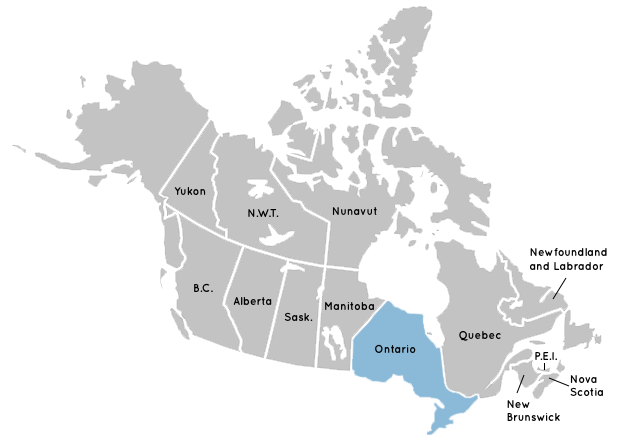
<style>
.page{position:relative;width:622px;height:439px;background:#ffffff}
.page>*{position:absolute;margin:0}
.t1{font:11px "Quicksand-Bold";color:#000000}
.t2{font:11px/13.2px "Quicksand-Bold";color:#000000}
</style>
<div class="page">
<p class="t1" style="left:174px;top:187px;width:32px;height:8px">Yukon</p>
<p class="t1" style="left:248px;top:209px;width:31px;height:8px">N.W.T.</p>
<p class="t1" style="left:332px;top:207px;width:45px;height:8px">Nunavut</p>
<p class="t2" style="left:530px;top:248px;width:77px;height:22px">Newfoundland<br>and Labrador</p>
<p class="t1" style="left:194px;top:283px;width:19px;height:9px">B.C.</p>
<p class="t1" style="left:233px;top:297px;width:39px;height:8px">Alberta</p>
<p class="t1" style="left:325px;top:302px;width:49px;height:8px">Manitoba</p>
<p class="t1" style="left:284px;top:312px;width:29px;height:9px">Sask.</p>
<p class="t1" style="left:459px;top:331px;width:42px;height:10px">Quebec</p>
<p class="t1" style="left:375px;top:344px;width:41px;height:9px">Ontario</p>
<p class="t1" style="left:535px;top:352px;width:22px;height:8px">P.E.I.</p>
<p class="t2" style="left:570px;top:375px;width:33px;height:21px">Nova<br>Scotia</p>
<p class="t2" style="left:507px;top:400px;width:53px;height:21px">New<br>Brunswick</p>
</div>
